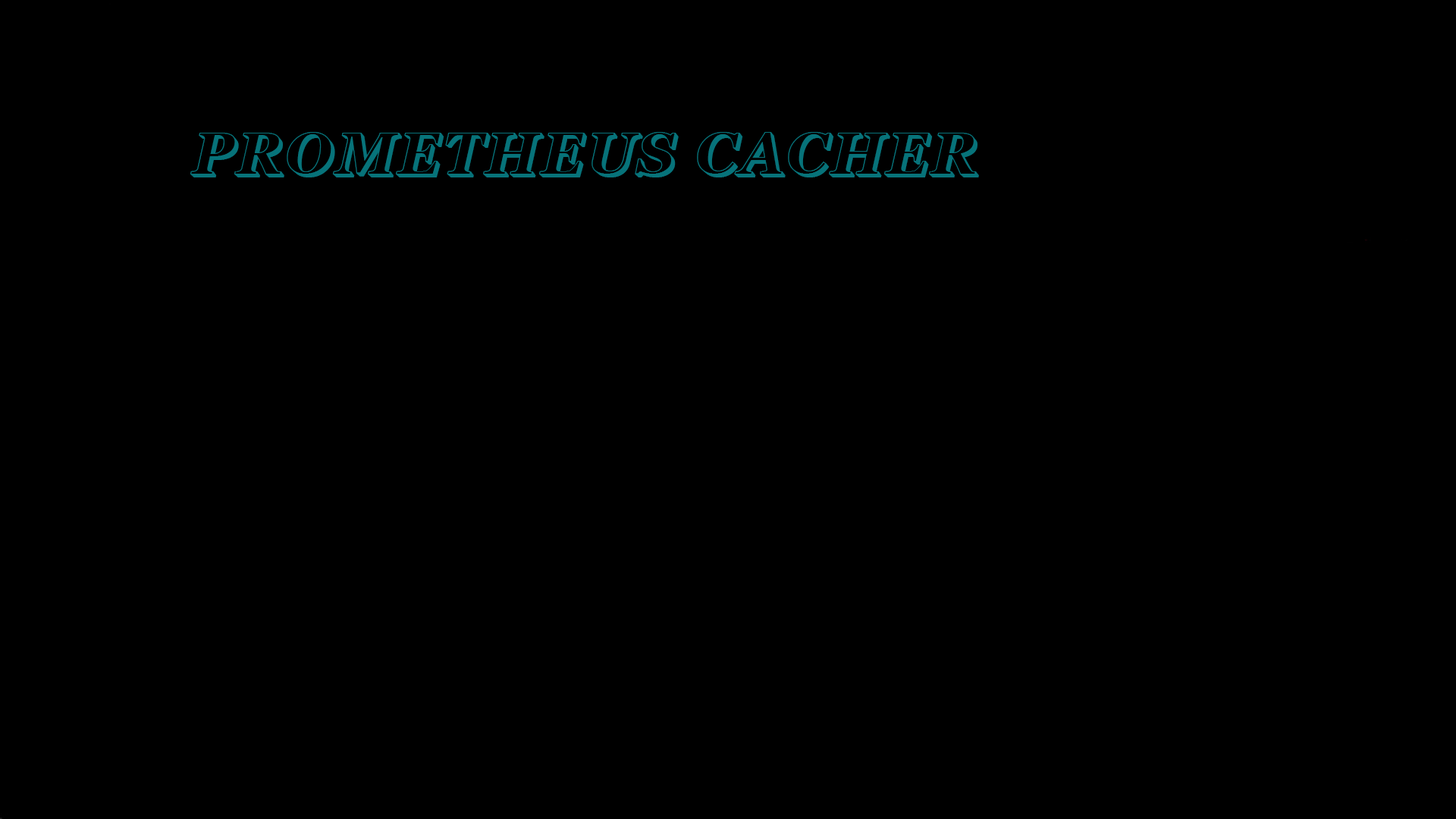
<style>
.page{position:relative;width:1456px;height:819px;background:#000000}
.page>*{position:absolute;margin:0}
.t1{font:58.4px "404error";letter-spacing:0.05em;color:#07737a}
</style>
<div class="page">
<p class="t1" style="left:190px;top:132px;width:789px;height:45px">PROMETHEUS CACHER</p>
</div>
